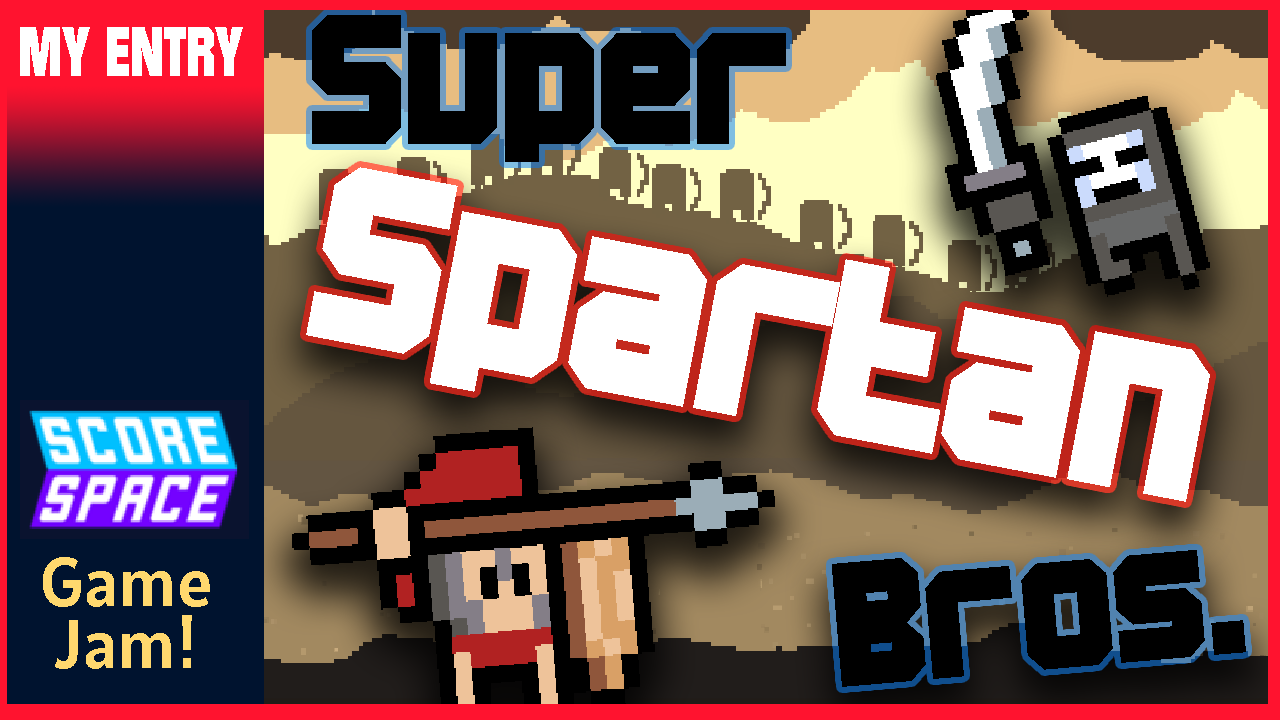
<style>
.page{position:relative;width:1280px;height:720px}
.page>*{position:absolute;margin:0}
.t1{font:178.5px "BNMachine";color:#000000}
.t2{font:68.7px "Autumn";color:#ffffff;scale:0.84 1}
.t3{font:242.1px "BNMachine";color:#ffffff}
.t4{font:69px/62.1px "Alatsi-Regular";color:#ffd86e}
.t5{font:170.8px "BNMachine";color:#000000}
</style>
<div class="page">
<p class="t1" style="left:312px;top:15px;width:474px;height:147px">Super</p>
<p class="t2" style="left:20px;top:27px;width:223px;height:49px">MY ENTRY</p>
<p class="t3" style="left:306px;top:167px;width:904px;height:335px;rotate:11deg">Spartan</p>
<p class="t4" style="left:43px;top:557px;width:167px;height:112px;text-align:center">Game<br>Jam!</p>
<p class="t5" style="left:832px;top:550px;width:414px;height:137px;rotate:-5deg">Bros.</p>
</div>
